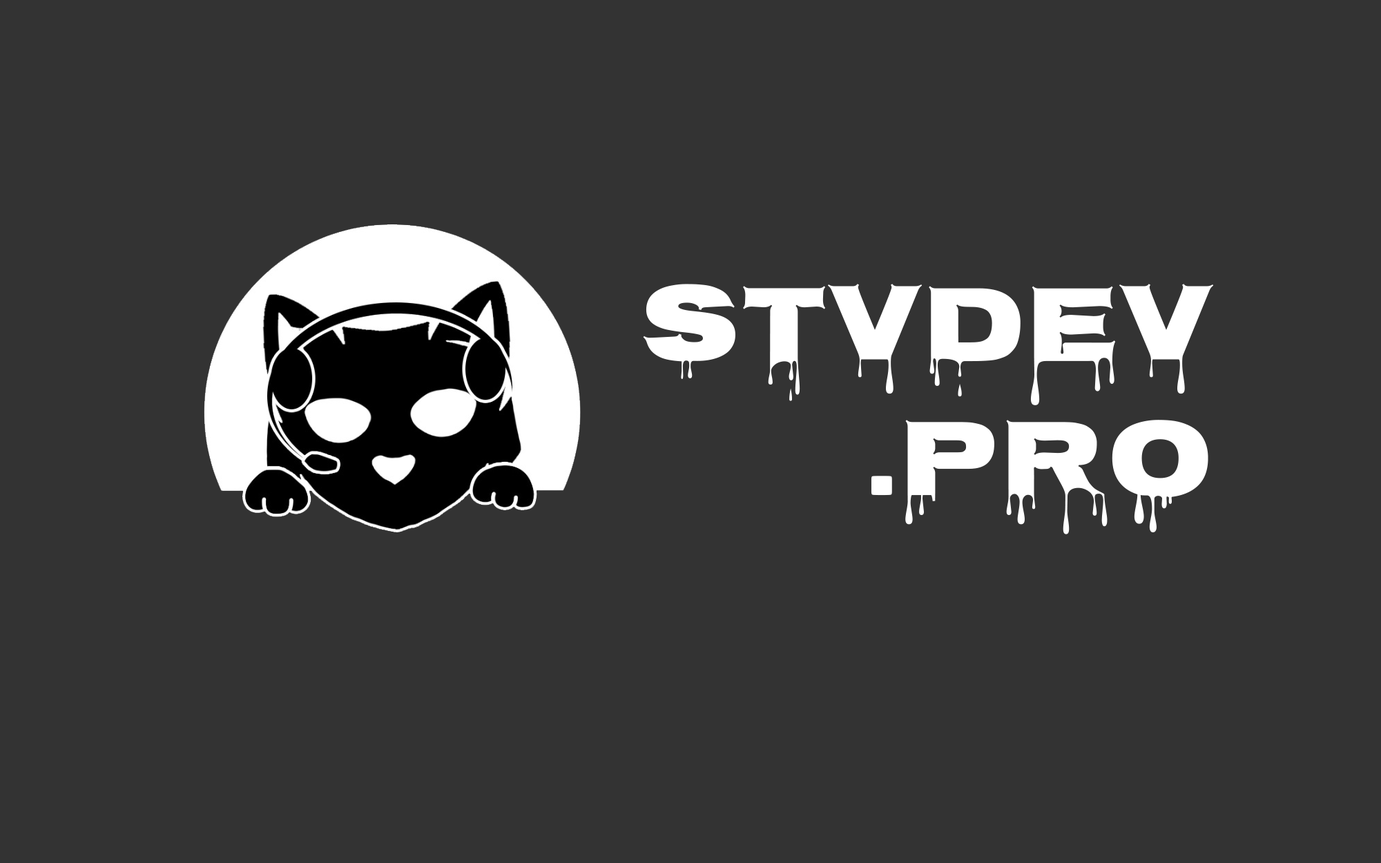
<style>
.page{position:relative;width:1381px;height:863px;background:#333333}
.page>*{position:absolute;margin:0}
.t1{font:111.6px "Nosifer-Regular";color:#ffffff}
</style>
<div class="page">
<p class="t1" style="left:643px;top:284px;width:571px;height:251px;text-align:right">STVDEV<br>.PRO</p>
</div>
